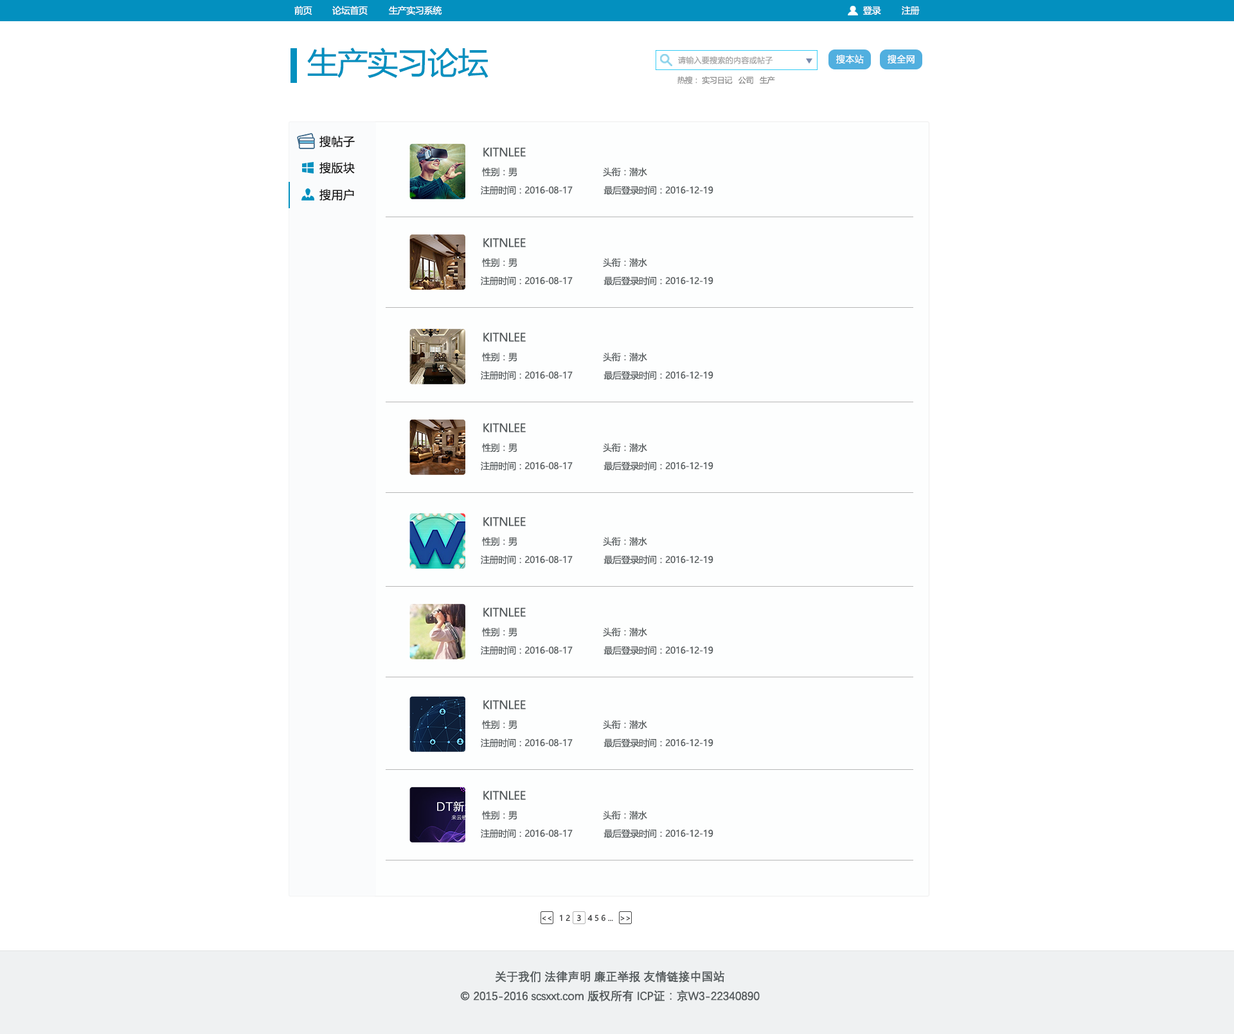
<style>
.page{position:relative;width:1234px;height:1034px;background:#ffffff}
.page>*{position:absolute;margin:0}
.t1{font:9px "MicrosoftYaHei";letter-spacing:-0.025em;color:#ffffff}
.t2{font:30.9px "MicrosoftYaHei";letter-spacing:-0.025em;color:#0390bf}
.t3{font:7.7px "MicrosoftYaHei";letter-spacing:0.025em;color:#a3a3a3}
.t4{font:9px "MicrosoftYaHei";letter-spacing:0.025em;color:#ffffff}
.t5{font:7.7px "MicrosoftYaHei";letter-spacing:-0.025em;color:#8a8a8a}
.t6{font:7.7px "MicrosoftYaHei";letter-spacing:-0.025em;color:#969696}
.t7{font:11.6px "MicrosoftYaHei";letter-spacing:0.025em;color:#141313}
.t8{font:11.6px "MicrosoftYaHei";letter-spacing:-0.025em;color:#545a5c}
.t9{font:9px "MicrosoftYaHei";letter-spacing:-0.025em;color:#545a5c}
.t10{font:7.7px "MicrosoftYaHei";letter-spacing:-0.01em;color:#38393a}
.t11{font:7.7px "MicrosoftYaHei";letter-spacing:-0.01em;color:#252626}
.t12{font:11.6px/19.3px "DengXian-Regular";letter-spacing:-0.025em;color:#545a5c;font-weight:bold}
</style>
<div class="page">
<p class="t1" style="left:294px;top:6px;width:18px;height:9px">前页</p>
<p class="t1" style="left:332px;top:6px;width:36px;height:9px">论坛首页</p>
<p class="t1" style="left:389px;top:6px;width:53px;height:9px">生产实习系统</p>
<p class="t1" style="left:863px;top:6px;width:18px;height:9px">登录</p>
<p class="t1" style="left:902px;top:6px;width:18px;height:9px">注册</p>
<p class="t2" style="left:307px;top:48px;width:182px;height:30px">生产实习论坛</p>
<p class="t3" style="left:678px;top:56px;width:95px;height:8px">请输入要搜索的内容或帖子</p>
<p class="t4" style="left:836px;top:55px;width:28px;height:9px">搜本站</p>
<p class="t4" style="left:888px;top:55px;width:27px;height:9px">搜全网</p>
<p class="t5" style="left:678px;top:76px;width:97px;height:8px"><span class="t6">热搜：</span> 实习日记   公司   生产</p>
<p class="t7" style="left:320px;top:136px;width:35px;height:11px">搜帖子</p>
<p class="t8" style="left:483px;top:147px;width:43px;height:10px">KITNLEE</p>
<p class="t7" style="left:320px;top:162px;width:35px;height:12px">搜版块</p>
<p class="t9" style="left:482px;top:167px;width:36px;height:10px">性别：男</p>
<p class="t9" style="left:603px;top:167px;width:44px;height:10px">头衔：潜水</p>
<p class="t9" style="left:481px;top:186px;width:92px;height:9px">注册时间：2016-08-17</p>
<p class="t9" style="left:604px;top:186px;width:110px;height:9px">最后登录时间：2016-12-19</p>
<p class="t7" style="left:320px;top:189px;width:34px;height:12px">搜用户</p>
<p class="t8" style="left:483px;top:238px;width:43px;height:10px">KITNLEE</p>
<p class="t9" style="left:482px;top:258px;width:36px;height:9px">性别：男</p>
<p class="t9" style="left:603px;top:258px;width:44px;height:9px">头衔：潜水</p>
<p class="t9" style="left:481px;top:276px;width:92px;height:9px">注册时间：2016-08-17</p>
<p class="t9" style="left:604px;top:276px;width:110px;height:9px">最后登录时间：2016-12-19</p>
<p class="t8" style="left:483px;top:332px;width:43px;height:10px">KITNLEE</p>
<p class="t9" style="left:482px;top:352px;width:36px;height:10px">性别：男</p>
<p class="t9" style="left:603px;top:352px;width:44px;height:10px">头衔：潜水</p>
<p class="t9" style="left:481px;top:371px;width:92px;height:9px">注册时间：2016-08-17</p>
<p class="t9" style="left:604px;top:371px;width:110px;height:9px">最后登录时间：2016-12-19</p>
<p class="t8" style="left:483px;top:423px;width:43px;height:10px">KITNLEE</p>
<p class="t9" style="left:482px;top:443px;width:36px;height:10px">性别：男</p>
<p class="t9" style="left:603px;top:443px;width:44px;height:10px">头衔：潜水</p>
<p class="t9" style="left:481px;top:462px;width:92px;height:9px">注册时间：2016-08-17</p>
<p class="t9" style="left:604px;top:462px;width:110px;height:9px">最后登录时间：2016-12-19</p>
<p class="t8" style="left:483px;top:517px;width:43px;height:9px">KITNLEE</p>
<p class="t9" style="left:482px;top:537px;width:36px;height:9px">性别：男</p>
<p class="t9" style="left:603px;top:537px;width:44px;height:9px">头衔：潜水</p>
<p class="t9" style="left:481px;top:555px;width:92px;height:9px">注册时间：2016-08-17</p>
<p class="t9" style="left:604px;top:555px;width:110px;height:9px">最后登录时间：2016-12-19</p>
<p class="t8" style="left:483px;top:608px;width:43px;height:9px">KITNLEE</p>
<p class="t9" style="left:482px;top:627px;width:36px;height:10px">性别：男</p>
<p class="t9" style="left:603px;top:627px;width:44px;height:10px">头衔：潜水</p>
<p class="t9" style="left:481px;top:646px;width:92px;height:9px">注册时间：2016-08-17</p>
<p class="t9" style="left:604px;top:646px;width:110px;height:9px">最后登录时间：2016-12-19</p>
<p class="t8" style="left:483px;top:700px;width:43px;height:10px">KITNLEE</p>
<p class="t9" style="left:482px;top:720px;width:36px;height:10px">性别：男</p>
<p class="t9" style="left:603px;top:720px;width:44px;height:10px">头衔：潜水</p>
<p class="t9" style="left:481px;top:739px;width:92px;height:9px">注册时间：2016-08-17</p>
<p class="t9" style="left:604px;top:739px;width:110px;height:9px">最后登录时间：2016-12-19</p>
<p class="t8" style="left:483px;top:791px;width:43px;height:9px">KITNLEE</p>
<p class="t9" style="left:482px;top:811px;width:36px;height:9px">性别：男</p>
<p class="t9" style="left:603px;top:811px;width:44px;height:9px">头衔：潜水</p>
<p class="t9" style="left:481px;top:829px;width:92px;height:9px">注册时间：2016-08-17</p>
<p class="t9" style="left:604px;top:829px;width:110px;height:9px">最后登录时间：2016-12-19</p>
<p class="t10" style="left:542px;top:915px;width:89px;height:7px">&lt;&lt;   1 2 <span class="t11">  3 </span>  4 5 6 ...   &gt;&gt;</p>
<p class="t12" style="left:460px;top:971px;width:300px;height:31px;text-align:center">关于我们 法律声明 廉正举报 友情链接中国站<br>© 2015-2016 scsxxt.com 版权所有 ICP证：京W3-22340890</p>
</div>
